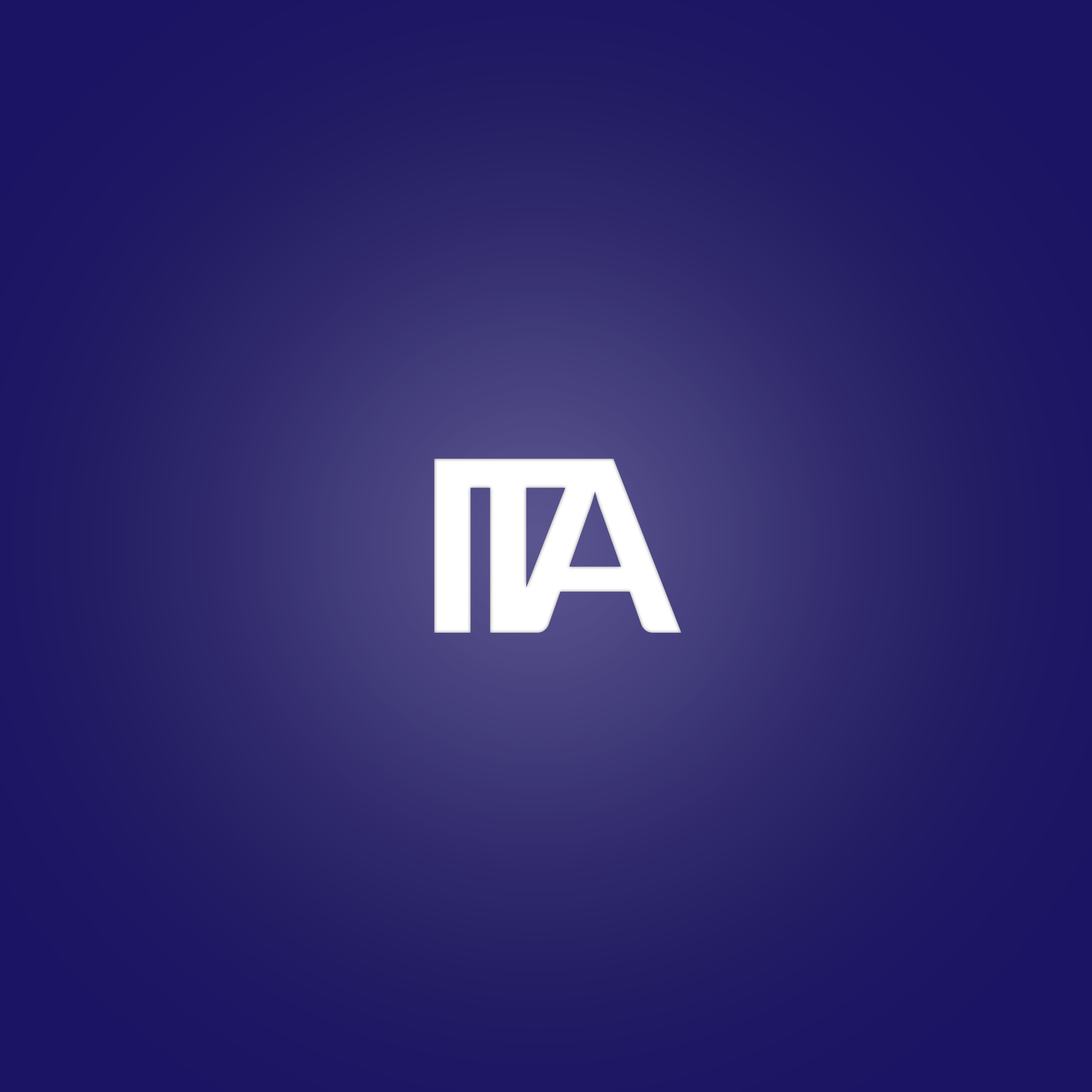
<style>
.page{position:relative;width:1092px;height:1092px}
.page>*{position:absolute;margin:0}
.t1{font:239.8px "Lato-Heavy";letter-spacing:-0.22em;color:#ffffff}
</style>
<div class="page">
<p class="t1" style="left:434px;top:458px;width:247px;height:175px">ITA</p>
</div>
